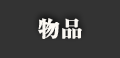
<style>
.page{position:relative;width:120px;height:58px;background:#333333}
.page>*{position:absolute;margin:0}
.t1{font:22px "RyuminPr6N-ExBold";color:#fbf8f3;font-weight:bold}
</style>
<div class="page">
<p class="t1" style="left:38px;top:18px;width:44px;height:21px">物品</p>
</div>
